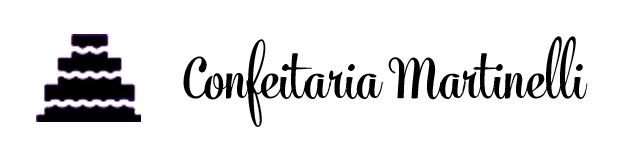
<style>
.page{position:relative;width:636px;height:156px;background:#ffffff}
.page>*{position:absolute;margin:0}
.t1{font:73.9px "MercuryScriptBoldW01-Rg";color:#000000;scale:0.86 1}
</style>
<div class="page">
<p class="t1" style="left:183px;top:36px;width:405px;height:91px">Confeitaria Martinelli</p>
</div>
